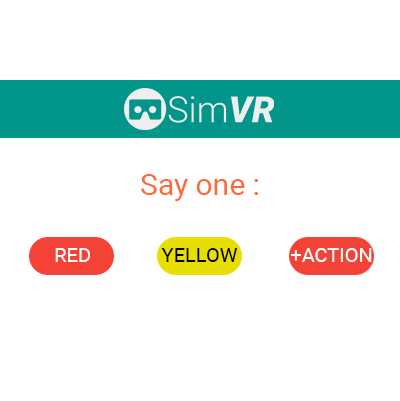
<style>
.page{position:relative;width:400px;height:401px;background:#ffffff}
.page>*{position:absolute;margin:0}
.t1{font:30px "Roboto-Regular";color:#ff6737}
.t2{font:20px "Roboto-Regular";color:#ffffff}
.t3{font:20px "Roboto-Regular";color:#000000}
</style>
<div class="page">
<p class="t1" style="left:141px;top:174px;width:117px;height:27px">Say one :</p>
<p class="t2" style="left:55px;top:248px;width:35px;height:14px">RED</p>
<p class="t3" style="left:161px;top:248px;width:77px;height:14px">YELLOW</p>
<p class="t2" style="left:290px;top:248px;width:82px;height:14px">+ACTION</p>
</div>
